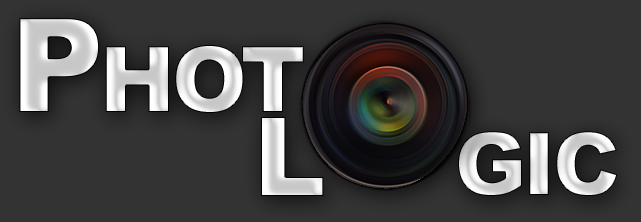
<style>
.page{position:relative;width:641px;height:222px;background:#333333}
.page>*{position:absolute;margin:0}
.t1{font:131.4px "Arial-Black";letter-spacing:-0.05em;font-variant:small-caps}
.t2{font:110px "Arial-Black";letter-spacing:-0.05em;font-variant:small-caps}
.t3{font:125.1px "Arial-Black";letter-spacing:-0.05em;font-variant:small-caps}
</style>
<div class="page">
<p class="t1" style="left:19px;top:18px;width:285px;height:95px">Phot</p>
<p class="t2" style="left:261px;top:117px;width:63px;height:79px">L</p>
<p class="t3" style="left:458px;top:131px;width:160px;height:65px">gic</p>
</div>
